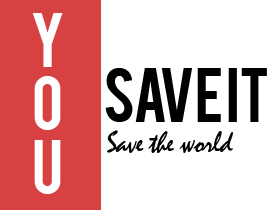
<style>
.page{position:relative;width:268px;height:210px;background:#ffffff}
.page>*{position:absolute;margin:0}
.t1{font:60px "Bebas";letter-spacing:-0.025em;color:#ffffff}
.t2{font:60px "Bebas";letter-spacing:-0.025em;color:#000000}
.t3{font:30px "Mistral";letter-spacing:-0.025em;color:#000000}
</style>
<div class="page">
<p class="t1" style="left:32px;top:13px;width:31px;height:54px">Y</p>
<p class="t1" style="left:34px;top:76px;width:27px;height:54px">O</p>
<p class="t2" style="left:105px;top:68px;width:162px;height:54px">save it</p>
<p class="t3" style="left:107px;top:130px;width:126px;height:23px">Save the world</p>
<p class="t1" style="left:34px;top:140px;width:27px;height:54px">U</p>
</div>
